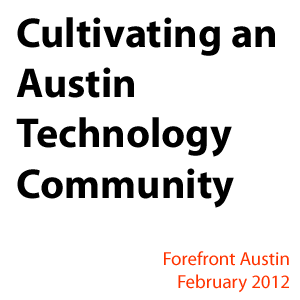
<style>
.page{position:relative;width:300px;height:300px;background:#ffffff}
.page>*{position:absolute;margin:0}
.t1{font:41.8px "MyriadPro-Bold";color:#000000}
.t2{font:18.9px "MyriadPro-Regular";color:#ff3300}
</style>
<div class="page">
<p class="t1" style="left:16px;top:17px;width:259px;height:191px">Cultivating an <br>Austin <br>Technology <br>Community</p>
<p class="t2" style="left:164px;top:251px;width:125px;height:42px;text-align:right">Forefront Austin<br>February 2012</p>
</div>
